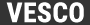
<style>
.page{position:relative;width:90px;height:25px;background:#333333}
.page>*{position:absolute;margin:0}
.t1{font:27px "RobotoCondensed-Bold";color:#ffffff;font-weight:bold}
</style>
<div class="page">
<p class="t1" style="left:6px;top:2px;width:78px;height:21px">VESCO</p>
</div>
